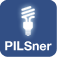
<style>
.page{position:relative;width:57px;height:57px;background:#324f85}
.page>*{position:absolute;margin:0}
.t1{font:12.4px "HelveticaNeue-Bold";color:#ffffff}
</style>
<div class="page">
<p class="t1" style="left:5px;top:41px;width:47px;height:10px">PILSner</p>
</div>
